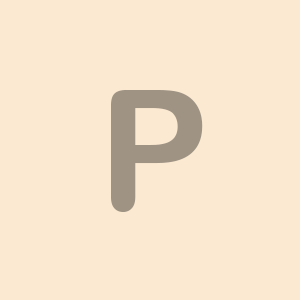
<style>
.page{position:relative;width:300px;height:300px;background:#fbe9d1}
.page>*{position:absolute;margin:0}
.t1{font:166.7px "ArialRoundedMTBold";color:#9f9384}
</style>
<div class="page">
<p class="t1" style="left:111px;top:90px;width:92px;height:122px">P</p>
</div>
